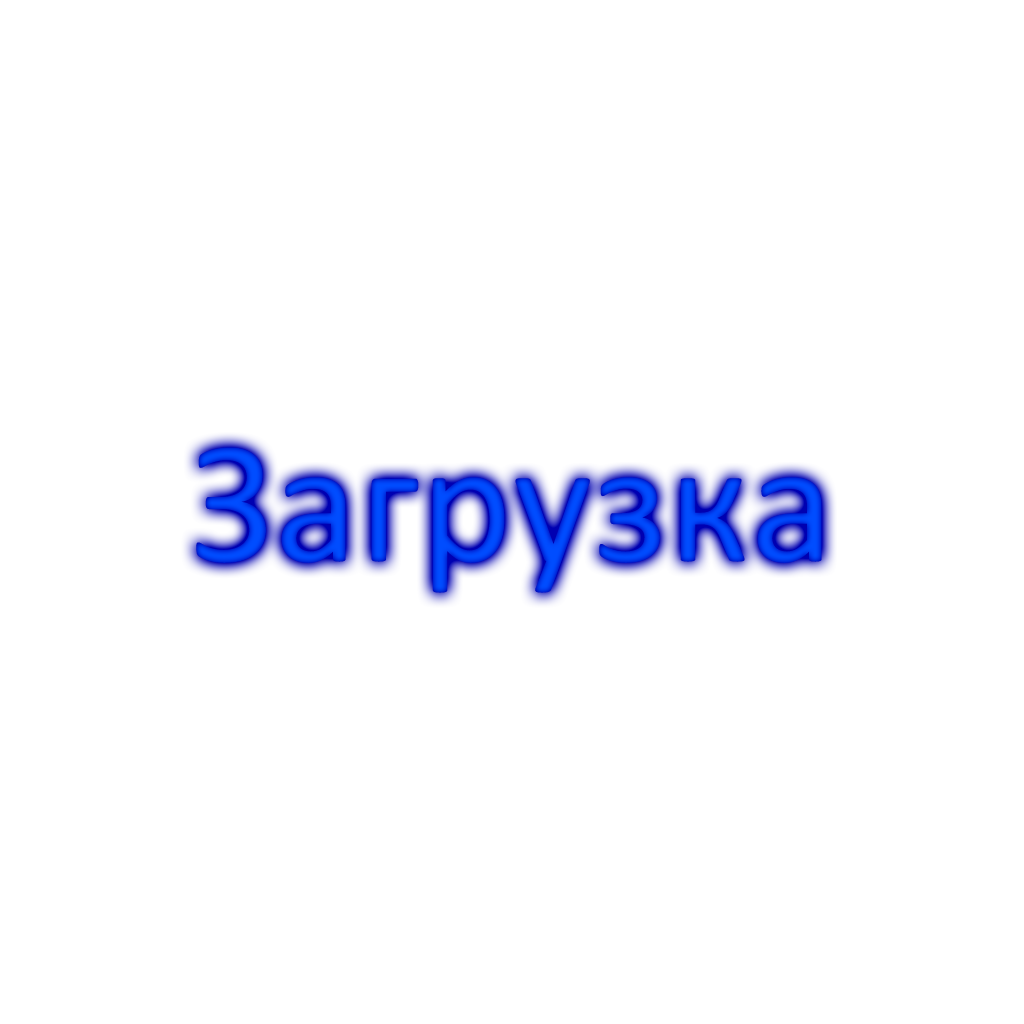
<style>
.page{position:relative;width:1024px;height:1024px;background:#ffffff}
.page>*{position:absolute;margin:0}
.t1{font:177px "Calibri";color:#0042f4}
</style>
<div class="page">
<p class="t1" style="left:196px;top:447px;width:626px;height:146px">Загрузка</p>
</div>
